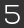
<style>
.page{position:relative;width:24px;height:28px;background:#333333}
.page>*{position:absolute;margin:0}
.t1{font:27.3px "NexaLight";color:#ffffff}
</style>
<div class="page">
<p class="t1" style="left:5px;top:5px;width:15px;height:19px">5</p>
</div>
